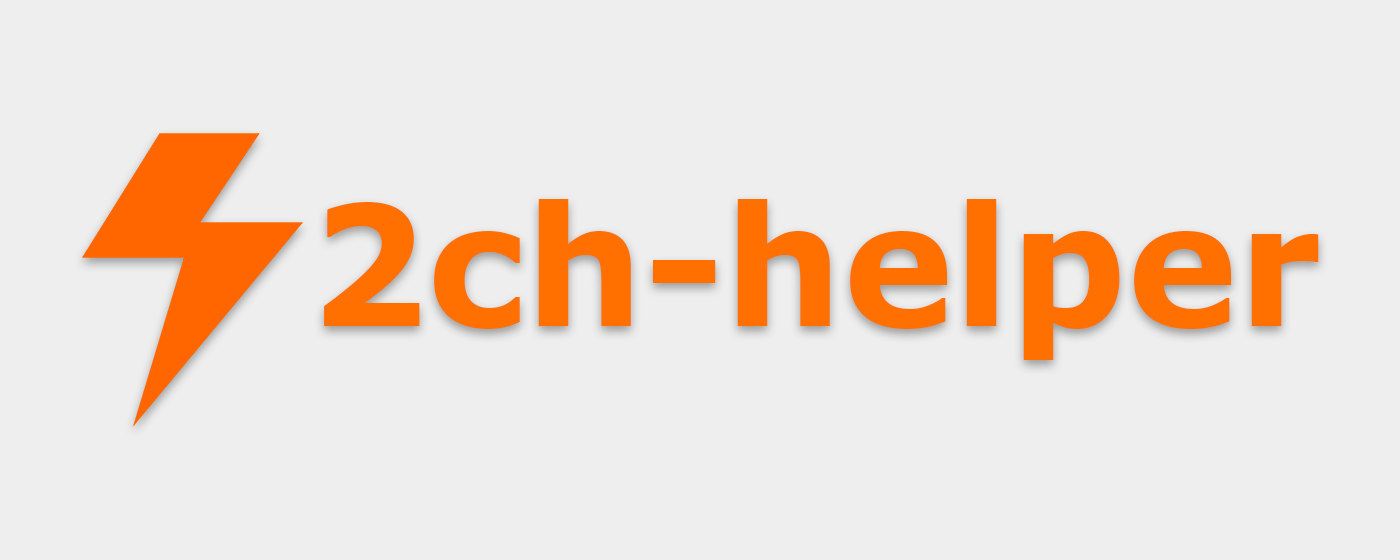
<style>
.page{position:relative;width:1400px;height:560px;background:#eeeeee}
.page>*{position:absolute;margin:0}
.t1{font:166.7px "Verdana-Bold";color:#ff7000}
</style>
<div class="page">
<p class="t1" style="left:324px;top:199px;width:995px;height:161px">2ch-helper</p>
</div>
